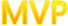
<style>
.page{position:relative;width:68px;height:26px;background:#ffffff}
.page>*{position:absolute;margin:0}
.t1{font:30px "MicrosoftYaHei"}
</style>
<div class="page">
<p class="t1" style="left:2px;top:1px;width:65px;height:23px">MVP</p>
</div>
